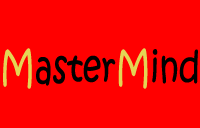
<style>
.page{position:relative;width:200px;height:128px;background:#ff0000}
.page>*{position:absolute;margin:0}
.t1{font:42.2px "KristenITC-Regular";color:#010101;scale:0.77 1}
.t2{font:42.2px "KristenITC-Regular";color:#e4d554;scale:0.77 1}
</style>
<div class="page">
<p class="t1" style="left:3px;top:48px;width:195px;height:41px"><span class="t2">M</span>aster<span class="t2">M</span>ind</p>
</div>
